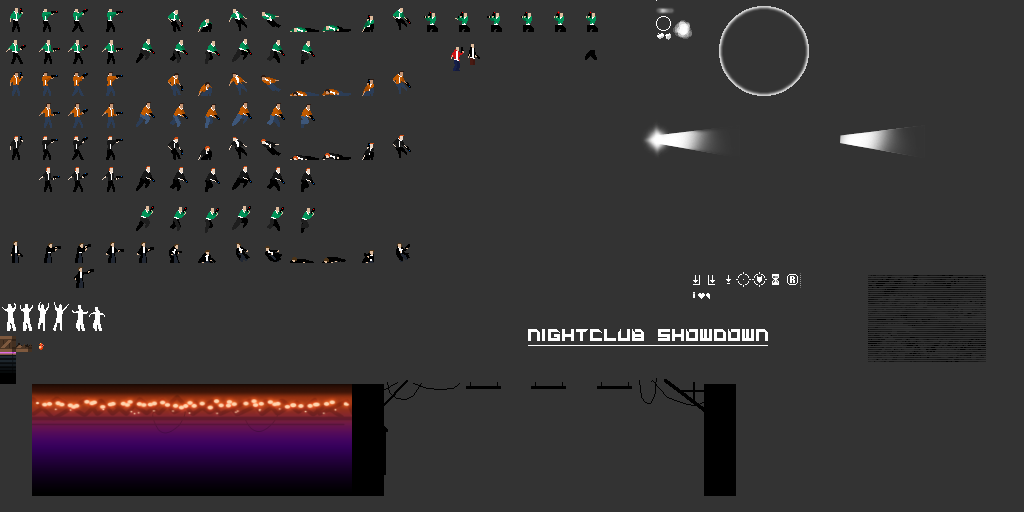
<style>
.page{position:relative;width:1024px;height:512px;background:#333333}
.page>*{position:absolute;margin:0}
.t1{font:23px "Super-glue";color:#ffffff}
</style>
<div class="page">
<p class="t1" style="left:528px;top:329px;width:240px;height:12px">NIGHTCLUB  SHOWDOWN</p>
</div>
